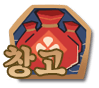
<style>
.page{position:relative;width:99px;height:88px;background:#ffffff}
.page>*{position:absolute;margin:0}
.t1{font:33.4px "SDKukdetopokki-bBd";letter-spacing:0.02em;color:#d7aa79}
</style>
<div class="page">
<p class="t1" style="left:4px;top:46px;width:62px;height:31px">창고</p>
</div>
